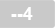
<style>
.page{position:relative;width:55px;height:28px;background:#c9c9c9}
.page>*{position:absolute;margin:0}
.t1{font:18.2px "Arial-BoldMT";color:#ffffff}
</style>
<div class="page">
<p class="t1" style="left:11px;top:7px;width:22px;height:13px">--4</p>
</div>
